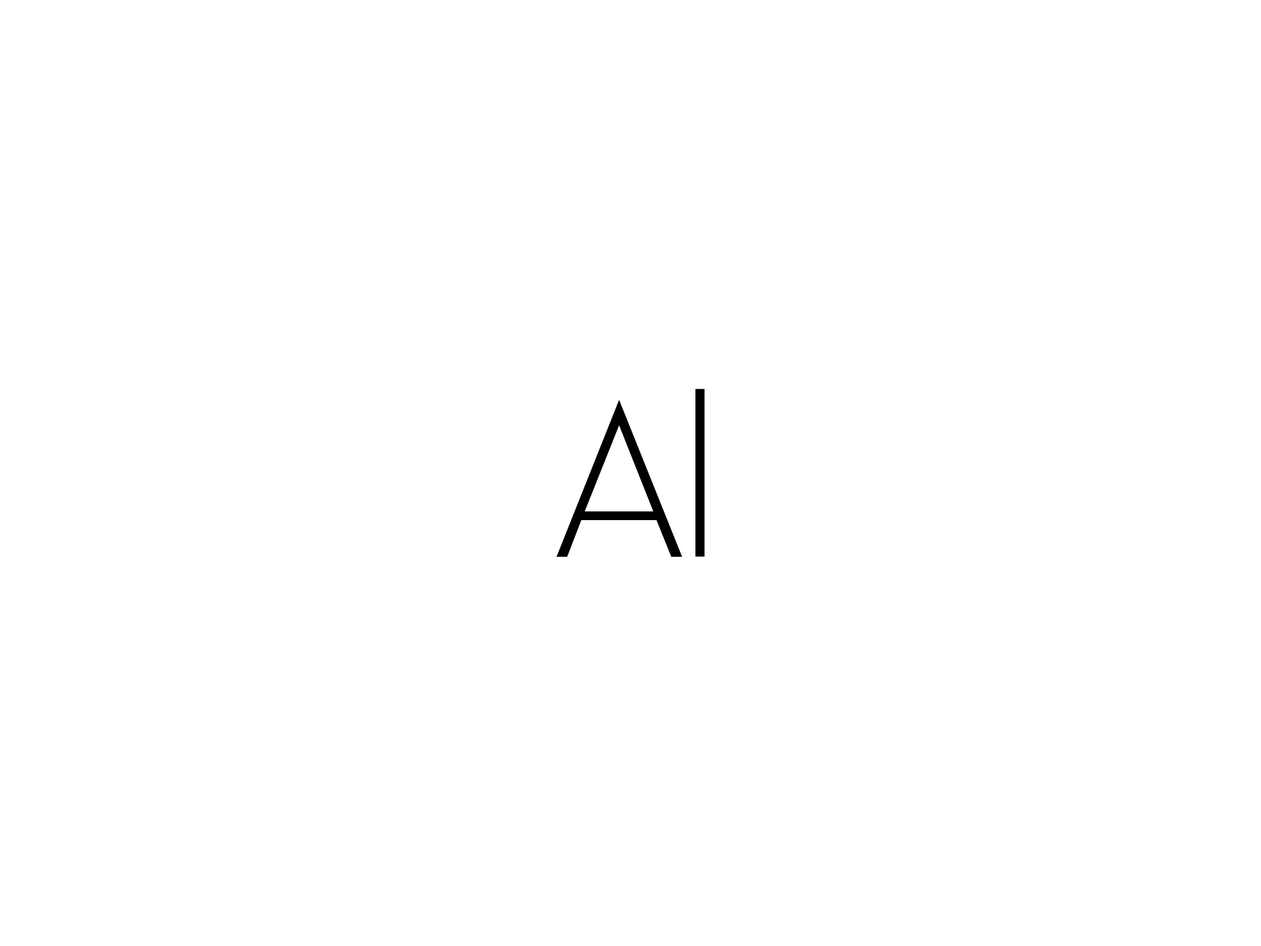
<style>
.page{position:relative;width:1261px;height:946px;background:#ffffff}
.page>*{position:absolute;margin:0}
.t1{font:222.4px "Alcubierre";color:#000000;scale:0.95 1}
</style>
<div class="page">
<p class="t1" style="left:557px;top:388px;width:148px;height:169px">Al</p>
</div>
